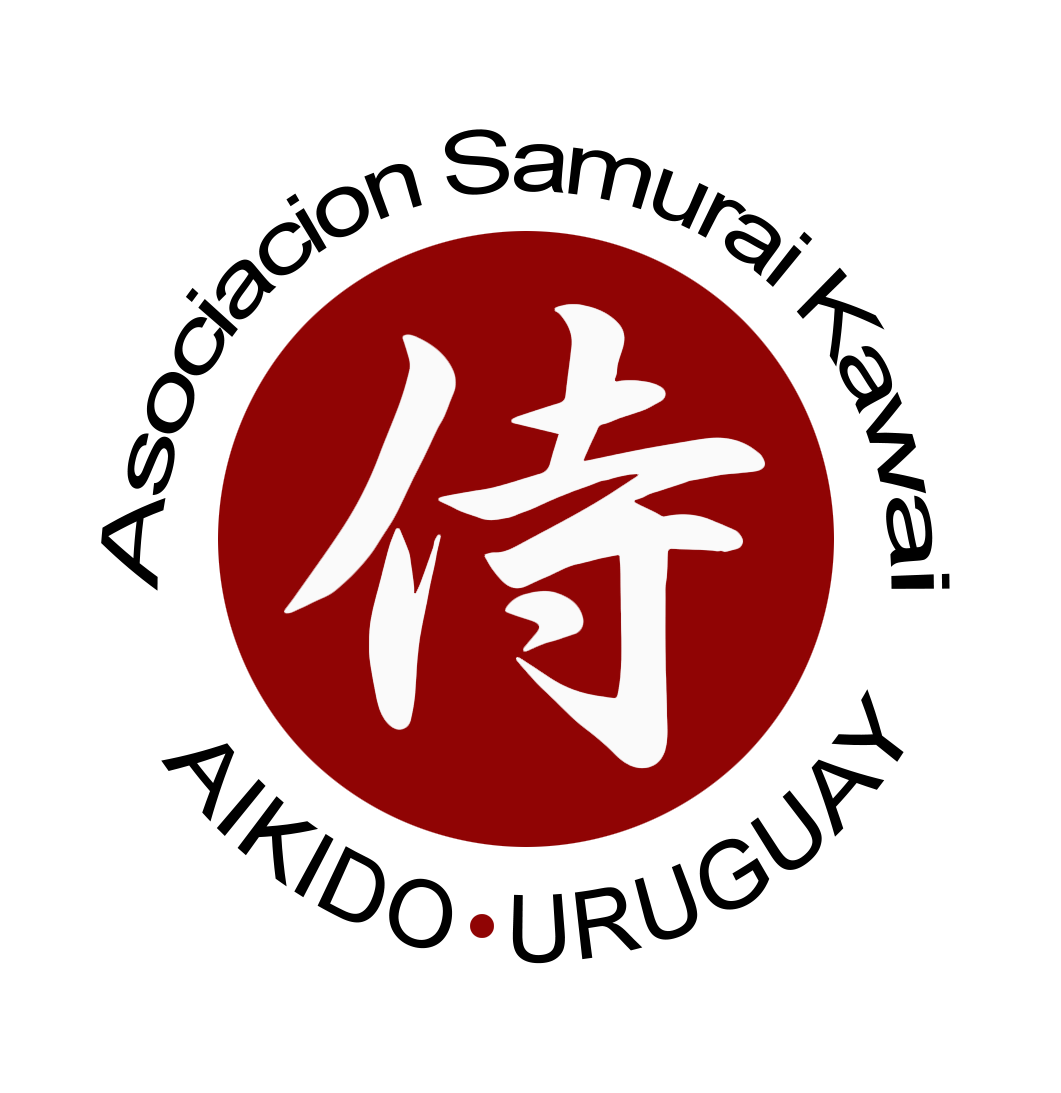
<style>
.page{position:relative;width:1061px;height:1093px;background:#ffffff}
.page>*{position:absolute;margin:0}
.t1{font:88px "ArialMT";letter-spacing:-0.06em;color:#000000;scale:0.74 1}
.t2{font:93px "ArialMT";color:#000000;scale:0.77 1}
</style>
<div class="page">
<p class="t1" style="left:101px;top:129px;width:849px;height:462px">Asociacion Samurai Kawai</p>
<p class="t2" style="left:161px;top:689px;width:743px;height:275px;rotate:-3deg">AIKIDO  URUGUAY</p>
</div>
